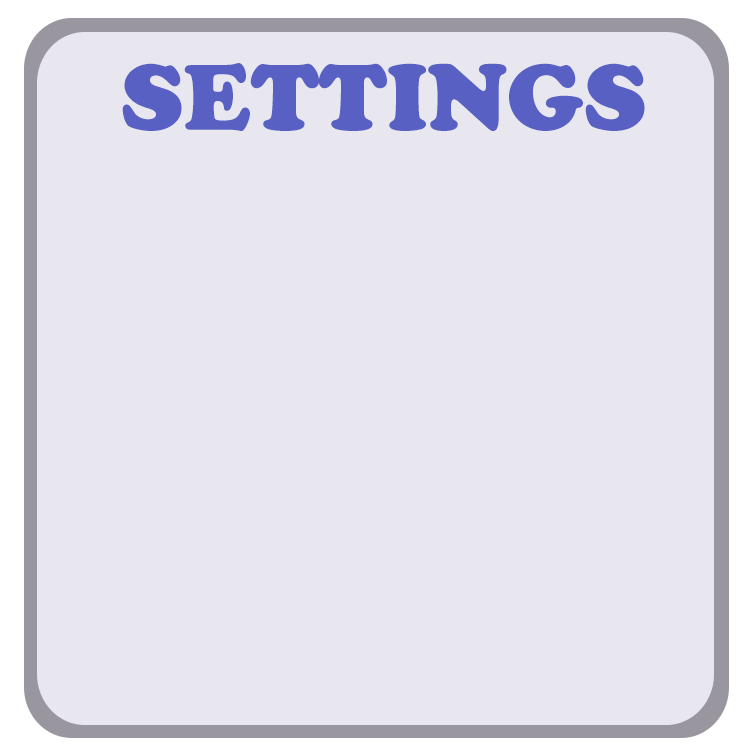
<style>
.page{position:relative;width:750px;height:750px;background:#e8e7f0}
.page>*{position:absolute;margin:0}
.t1{font:97.2px "CooperBlack";color:#5960c3}
</style>
<div class="page">
<p class="t1" style="left:122px;top:63px;width:523px;height:68px">SETTINGS</p>
</div>
